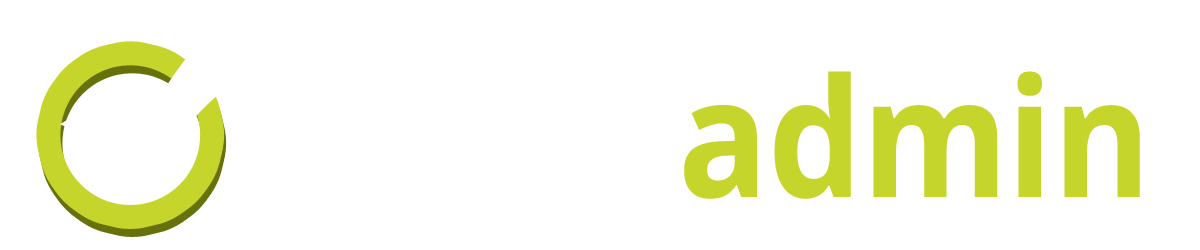
<style>
.page{position:relative;width:1200px;height:250px;background:#ffffff}
.page>*{position:absolute;margin:0}
.t1{font:165px "OpenSans-Bold";color:#c5d52b;scale:0.9 1}
.t2{font:165px "OpenSans-Bold";color:#ffffff;scale:0.9 1}
</style>
<div class="page">
<p class="t1" style="left:287px;top:71px;width:853px;height:128px"><span class="t2">MWS </span>admin</p>
</div>
